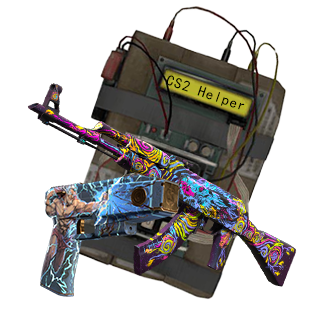
<style>
.page{position:relative;width:310px;height:310px;background:#ffffff}
.page>*{position:absolute;margin:0}
.t1{font:15px "SimHei";letter-spacing:0.06em;color:#000000}
</style>
<div class="page">
<p class="t1" style="left:166px;top:75px;width:79px;height:35px;rotate:19deg">CS2 Helper</p>
</div>
